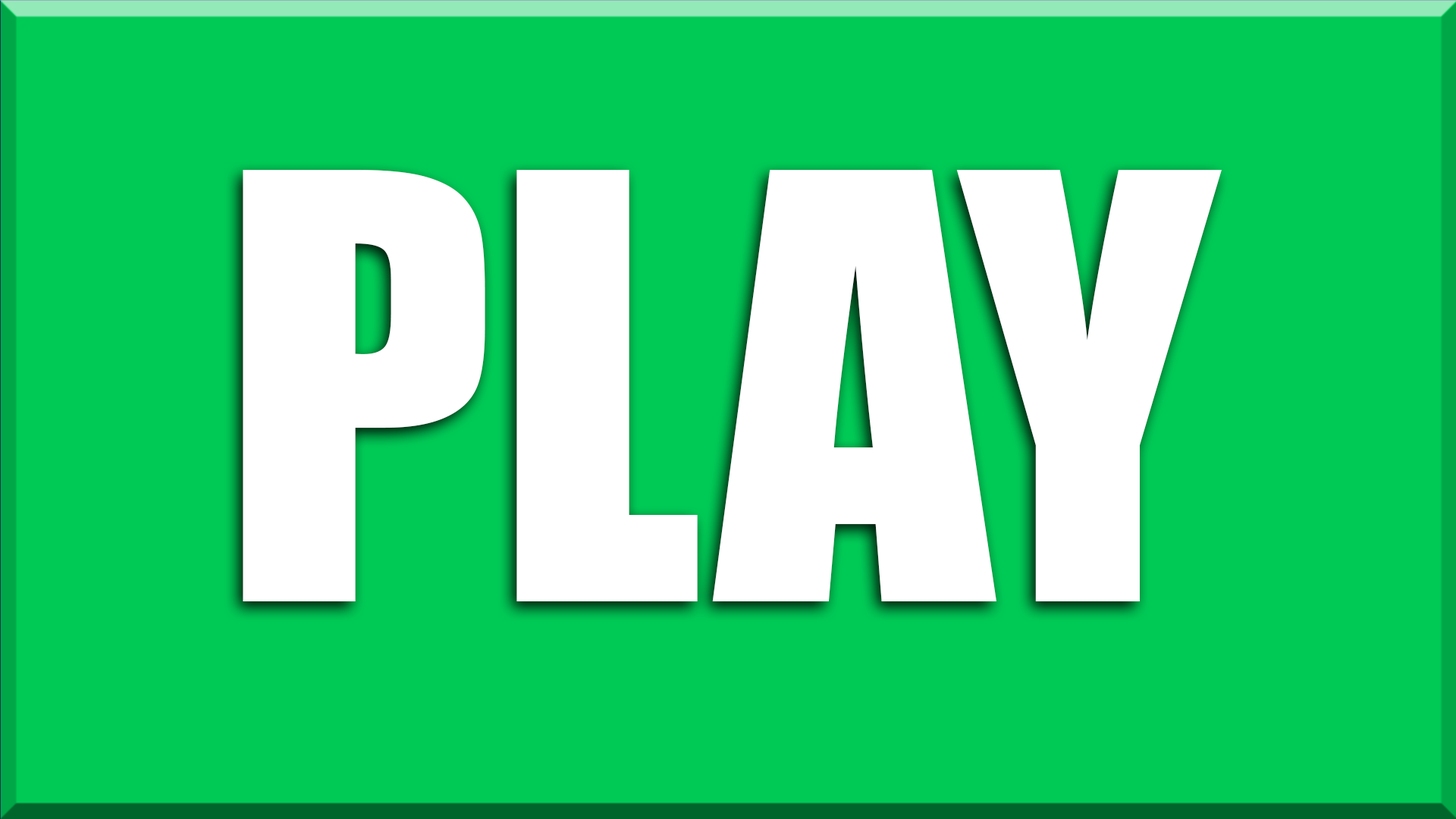
<style>
.page{position:relative;width:1456px;height:819px;background:#00ca56}
.page>*{position:absolute;margin:0}
.t1{font:545.9px "Impact";color:#ffffff}
</style>
<div class="page">
<p class="t1" style="left:243px;top:170px;width:979px;height:431px">PLAY</p>
<p class="t1" style="left:243px;top:170px;width:979px;height:431px">PLAY</p>
</div>
